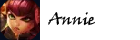
<style>
.page{position:relative;width:140px;height:40px;background:#ffffff}
.page>*{position:absolute;margin:0}
.t1{font:12px "VinerHandITC";color:#000000}
</style>
<div class="page">
<p class="t1" style="left:48px;top:12px;width:47px;height:14px">Annie</p>
</div>
